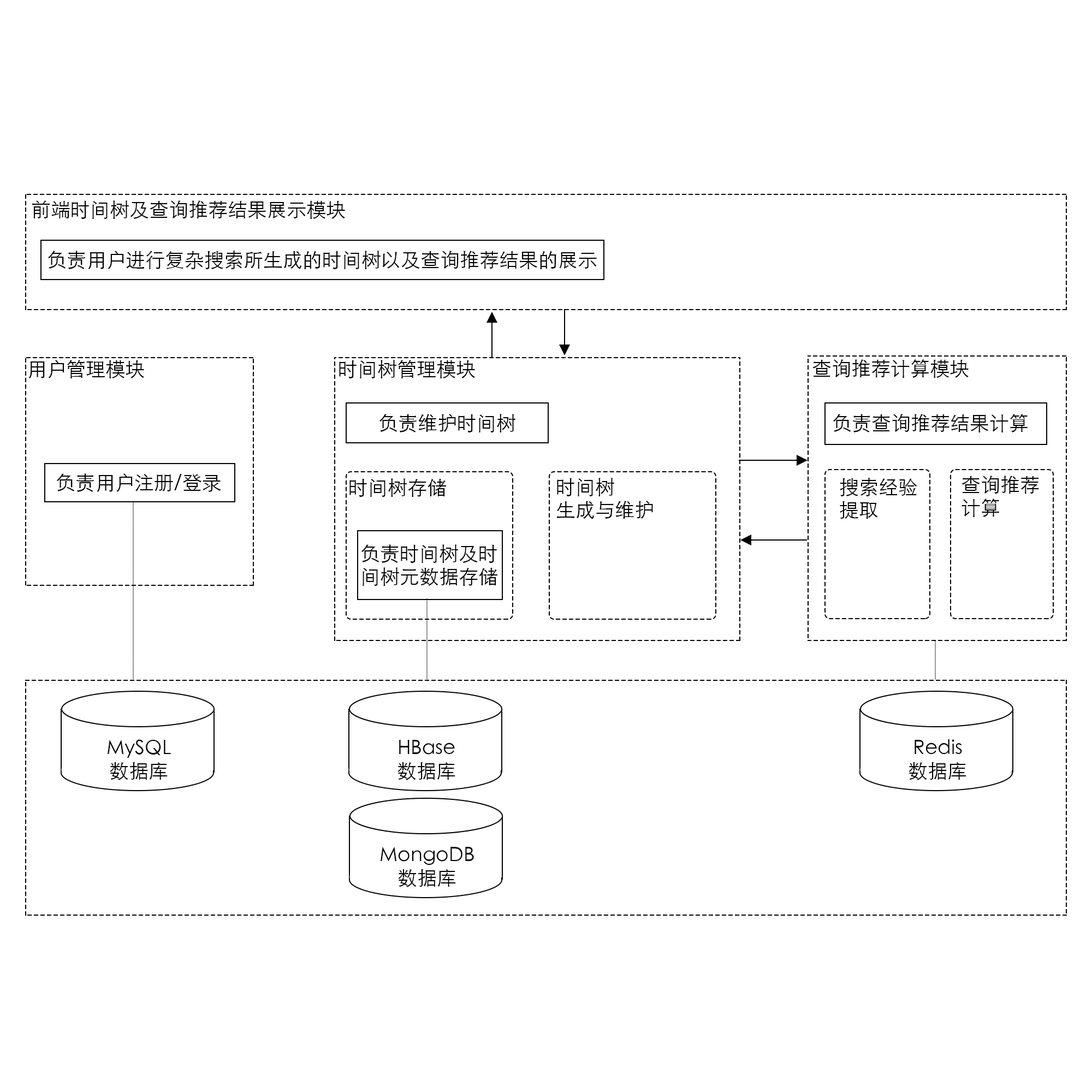
<style>
.page{position:relative;width:1092px;height:1092px;background:#ffffff}
.page>*{position:absolute;margin:0}
.t1{font:19.7px "STHeitiSC-Light";color:#000000}
</style>
<div class="page">
<p class="t1" style="left:32px;top:200px;width:313px;height:19px">前端时间树及查询推荐结果展示模块</p>
<p class="t1" style="left:48px;top:251px;width:549px;height:18px">负责用户进行复杂搜索所生成的时间树以及查询推荐结果的展示</p>
<p class="t1" style="left:28px;top:360px;width:116px;height:18px">用户管理模块</p>
<p class="t1" style="left:339px;top:360px;width:136px;height:18px">时间树管理模块</p>
<p class="t1" style="left:812px;top:359px;width:157px;height:19px">查询推荐计算模块</p>
<p class="t1" style="left:379px;top:414px;width:136px;height:18px">负责维护时间树</p>
<p class="t1" style="left:833px;top:414px;width:195px;height:18px">负责查询推荐结果计算</p>
<p class="t1" style="left:56px;top:473px;width:165px;height:19px">负责用户注册/登录</p>
<p class="t1" style="left:349px;top:478px;width:97px;height:19px">时间树存储</p>
<p class="t1" style="left:556px;top:478px;width:97px;height:41px">时间树<br>生成与维护</p>
<p class="t1" style="left:840px;top:478px;width:77px;height:41px">搜索经验<br>提取</p>
<p class="t1" style="left:961px;top:476px;width:78px;height:41px">查询推荐<br>计算</p>
<p class="t1" style="left:361px;top:544px;width:136px;height:42px;text-align:center">负责时间树及时<br>间树元数据存储</p>
<p class="t1" style="left:108px;top:739px;width:63px;height:41px;text-align:center">MySQL<br>数据库</p>
<p class="t1" style="left:397px;top:740px;width:58px;height:40px;text-align:center">HBase<br>数据库</p>
<p class="t1" style="left:909px;top:739px;width:57px;height:41px;text-align:center">Redis<br>数据库</p>
<p class="t1" style="left:381px;top:847px;width:93px;height:40px;text-align:center">MongoDB<br>数据库</p>
</div>
